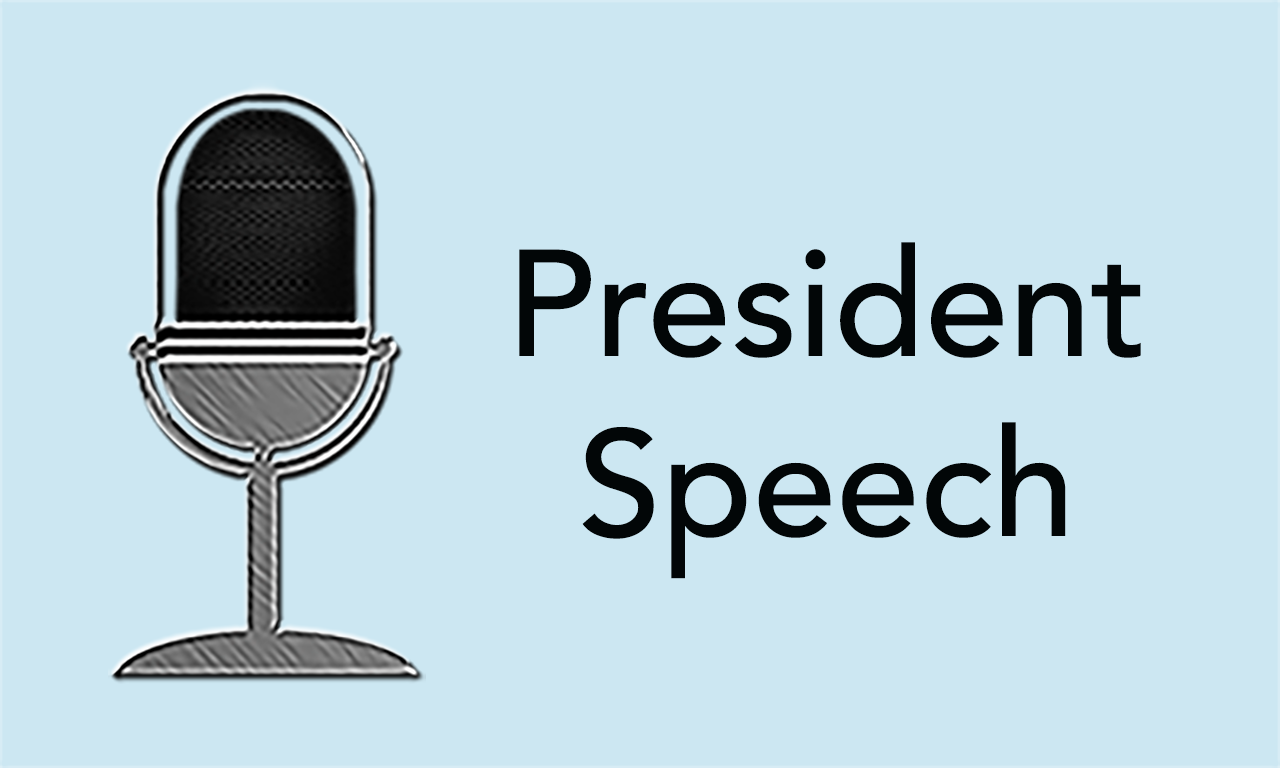
<style>
.page{position:relative;width:1280px;height:768px;background:#cce7f2}
.page>*{position:absolute;margin:0}
.t1{font:150px "Avenir-Medium";color:#020607}
</style>
<div class="page">
<p class="t1" style="left:519px;top:242px;width:622px;height:337px;text-align:center">President <br>Speech</p>
</div>
